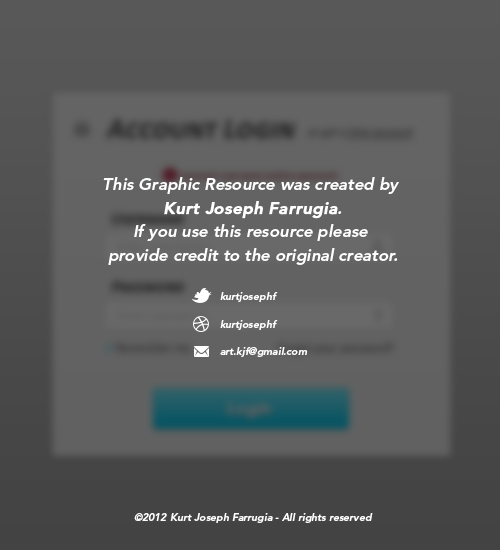
<style>
.page{position:relative;width:500px;height:550px}
.page>*{position:absolute;margin:0}
.t1{font:29.2px "CalibriBoldCaps-Bold";color:#535353;font-style:italic}
.t2{font:16.7px/23.6px "Avenir-Heavy";color:#ffffff;font-style:italic}
.t3{font:16.7px/23.6px "Avenir-Heavy";color:#ffffff;font-weight:bold;font-style:italic}
.t4{font:16.7px "CalibriBoldCaps-Bold";color:#424242;font-style:italic}
.t5{font:10.4px/27.7px "Avenir-Heavy";color:#ffffff;font-style:italic}
.t6{font:12.5px "Calibri";color:#575757}
.t7{font:16.7px "Avenir-Heavy";color:#365c62;font-weight:bold;font-style:italic}
.t8{font:10.4px "Avenir-Heavy";color:#ffffff;font-style:italic}
</style>
<div class="page">
<p class="t1" style="left:106px;top:119px;width:189px;height:20px">Account Login</p>
<p class="t2" style="left:103px;top:177px;width:296px;height:88px;text-align:center">This Graphic Resource was created by <br><span class="t3">Kurt Joseph Farrugia</span>.<br>If you use this resource please <br>provide credit to the original creator.</p>
<p class="t4" style="left:111px;top:281px;width:74px;height:12px">Password</p>
<p class="t5" style="left:220px;top:292px;width:88px;height:65px">kurtjosephf<br>kurtjosephf<br>art.kjf@gmail.com</p>
<p class="t6" style="left:116px;top:343px;width:74px;height:9px">Remember me</p>
<p class="t7" style="left:227px;top:402px;width:44px;height:17px">Login</p>
<p class="t8" style="left:134px;top:513px;width:239px;height:10px">©2012 Kurt Joseph Farrugia - All rights reserved</p>
</div>
